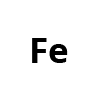
<style>
.page{position:relative;width:100px;height:100px;background:#ffffff}
.page>*{position:absolute;margin:0}
.t1{font:35px "OpenSans-Bold";color:#000000}
</style>
<div class="page">
<p class="t1" style="left:32px;top:38px;width:36px;height:25px">Fe</p>
</div>
